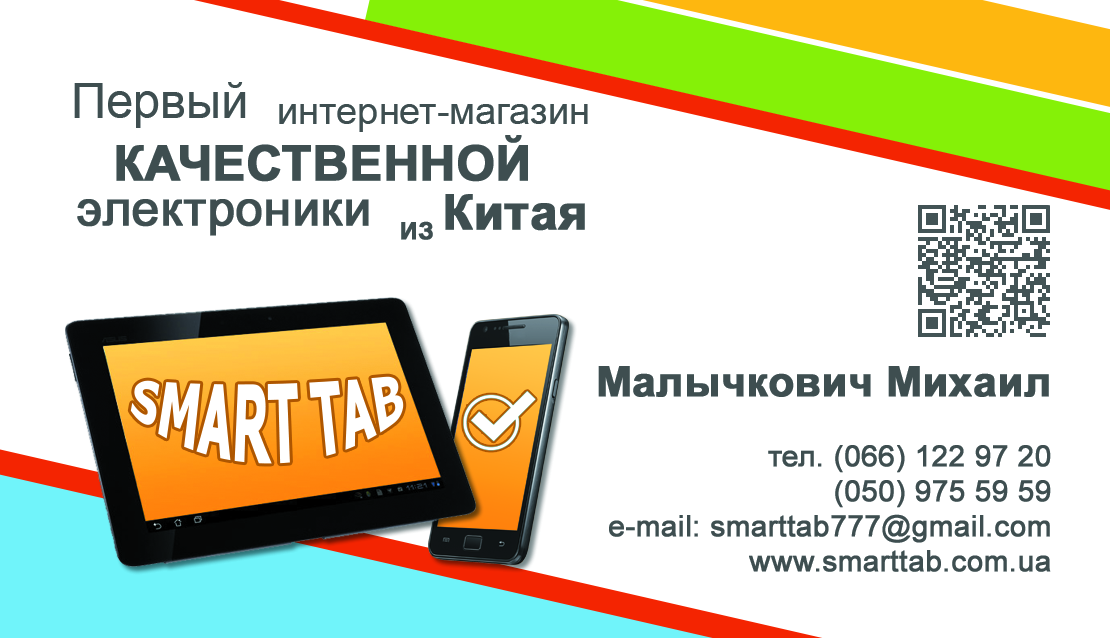
<style>
.page{position:relative;width:1110px;height:638px;background:#ffffff}
.page>*{position:absolute;margin:0}
.t1{font:48.7px "ArialMT";color:#3e4e50}
.t2{font:37.9px "ArialMT";color:#3e4e50}
.t3{font:48.7px "Arial-BoldMT";color:#3e4e50;font-weight:bold}
.t4{font:48.7px "ArialMT";color:#3e4e50;font-weight:bold}
.t5{font:32.5px "ArialMT";color:#3e4e50;font-weight:bold}
.t6{font:29.2px "ArialMT";color:#3e4e50;font-weight:bold}
.t7{font:41.7px "Arial-BoldMT";color:#3e4e50;font-weight:bold}
.t8{font:47px "Tahoma-Bold";color:#ffffff}
</style>
<div class="page">
<p class="t1" style="left:74px;top:82px;width:172px;height:46px">Первый</p>
<p class="t2" style="left:279px;top:104px;width:309px;height:28px">интернет-магазин</p>
<p class="t3" style="left:116px;top:135px;width:412px;height:47px">КАЧЕСТВЕННОЙ</p>
<p class="t3" style="left:445px;top:194px;width:140px;height:37px">Китая</p>
<p class="t4" style="left:77px;top:199px;width:292px;height:37px">электроники</p>
<p class="t5" style="left:401px;top:221px;width:32px;height:19px">из</p>
<p class="t6" style="left:598px;top:366px;width:453px;height:206px;text-align:right"><span class="t7">Малычкович Михаил<br></span><br>тел. (066) 122 97 20<br>(050) 975 59 59<br>e-mail: smarttab777@gmail.com<br>www.smarttab.com.ua</p>
<p class="t8" style="left:130px;top:376px;width:274px;height:88px">SMART TAB</p>
</div>
